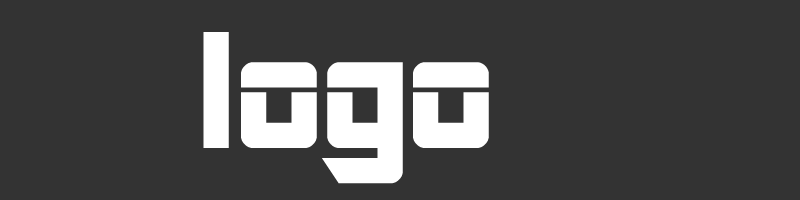
<style>
.page{position:relative;width:800px;height:200px;background:#333333}
.page>*{position:absolute;margin:0}
.t1{font:160px "ARDESTINE";color:#ffffff}
</style>
<div class="page">
<p class="t1" style="left:203px;top:32px;width:286px;height:152px">logo</p>
</div>
